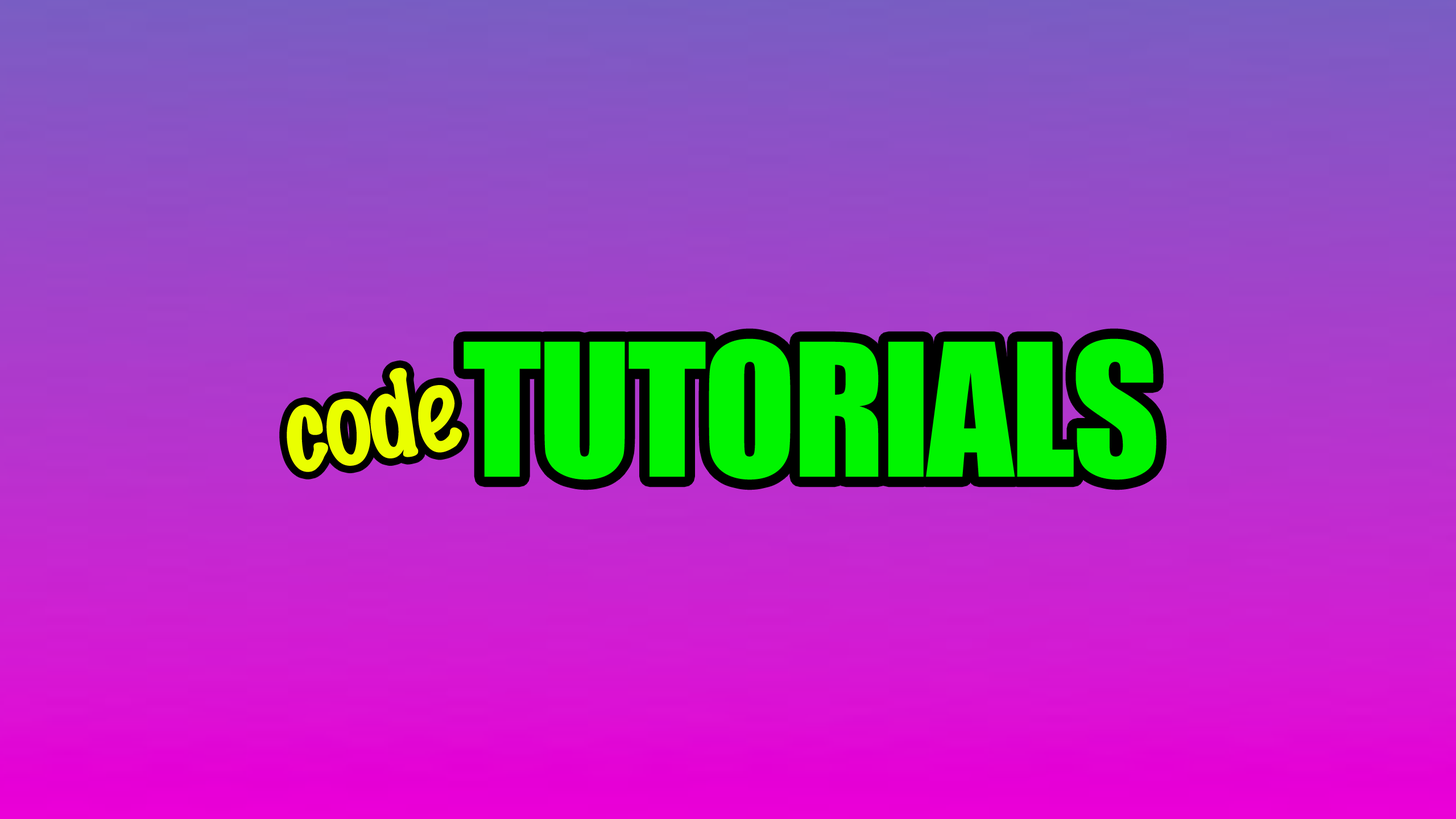
<style>
.page{position:relative;width:1456px;height:819px}
.page>*{position:absolute;margin:0}
.t1{font:170.6px "Impact";letter-spacing:-0.02em;color:#00f500}
.t2{font:113.7px "MarkerFelt-Thin";letter-spacing:-0.02em;color:#eaff00}
</style>
<div class="page">
<p class="t1" style="left:464px;top:338px;width:692px;height:142px">TUTORIALS</p>
<p class="t2" style="left:287px;top:367px;width:175px;height:105px;rotate:-8deg">code</p>
</div>
